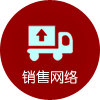
<style>
.page{position:relative;width:100px;height:100px;background:#960000}
.page>*{position:absolute;margin:0}
.t1{font:14px "FZY3JW--GB1-0";color:#ffffff}
</style>
<div class="page">
<p class="t1" style="left:22px;top:70px;width:56px;height:14px">销售网络</p>
</div>
